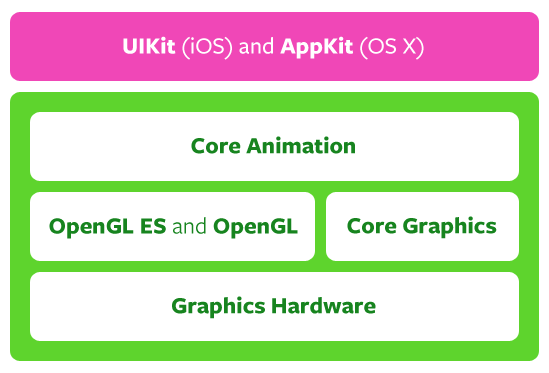
<style>
.page{position:relative;width:549px;height:373px;background:#ffffff}
.page>*{position:absolute;margin:0}
.t1{font:24px "FreightSansProMedium-Regular";color:#ffffff}
.t2{font:24px "FreightSansProBold-Regular";color:#ffffff}
.t3{font:24px "FreightSansProBold-Regular";color:#17841f}
.t4{font:24px "FreightSansProBook-Regular";color:#17841f}
</style>
<div class="page">
<p class="t1" style="left:123px;top:36px;width:301px;height:24px"><span class="t2">UIKit </span>(iOS) and <span class="t2">AppKit</span> (OS X)</p>
<p class="t3" style="left:191px;top:136px;width:164px;height:18px">Core Animation</p>
<p class="t3" style="left:49px;top:217px;width:249px;height:22px">OpenGL ES <span class="t4">and </span>OpenGL</p>
<p class="t3" style="left:347px;top:216px;width:150px;height:23px">Core Graphics</p>
<p class="t3" style="left:172px;top:296px;width:204px;height:23px">Graphics Hardware</p>
</div>
